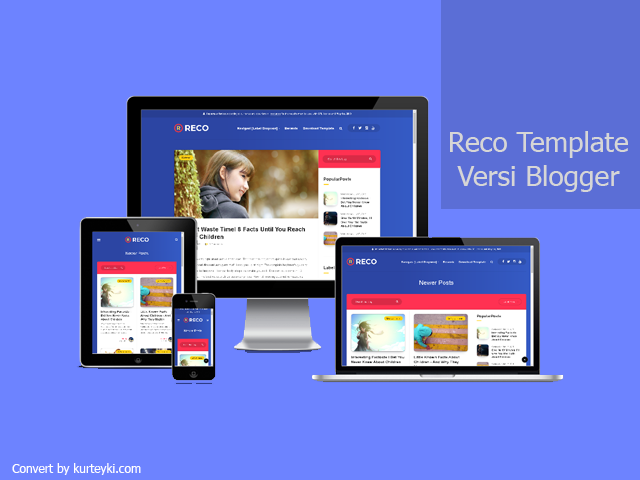
<style>
.page{position:relative;width:640px;height:480px;background:#6d83ff}
.page>*{position:absolute;margin:0}
.t1{font:28px "Tahoma";color:#d6d6d6}
.t2{font:12px "Tahoma";color:#ffffff}
</style>
<div class="page">
<p class="t1" style="left:450px;top:131px;width:178px;height:61px;text-align:center">Reco Template <br>Versi Blogger</p>
<p class="t2" style="left:12px;top:463px;width:129px;height:12px">Convert by kurteyki.com</p>
</div>
